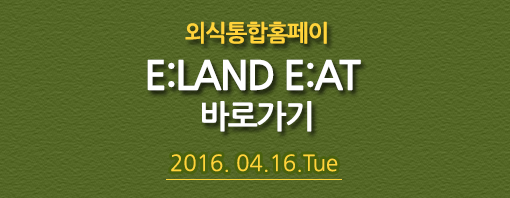
<style>
.page{position:relative;width:510px;height:198px}
.page>*{position:absolute;margin:0}
.t1{font:40px "NanumGothicBold";letter-spacing:-0.05em;color:#ffffff}
.t2{font:23px "NanumGothicBold";letter-spacing:-0.05em;color:#ffd33a}
.t3{font:32px "NanumGothicBold";letter-spacing:-0.05em;color:#ffffff}
.t4{font:22px "NanumGothic";color:#ffd33a}
</style>
<div class="page">
<p class="t1" style="left:147px;top:21px;width:214px;height:111px;text-align:center"><span class="t2">외식통합홈페이<br></span>E:LAND E:AT <br><span class="t3">바로가기</span></p>
<p class="t4" style="left:171px;top:154px;width:167px;height:18px">2016. 04.16.Tue</p>
</div>
